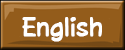
<style>
.page{position:relative;width:125px;height:50px;background:#935c1b}
.page>*{position:absolute;margin:0}
.t1{font:24px "Chinacat";color:#ffffff;font-weight:bold}
</style>
<div class="page">
<p class="t1" style="left:22px;top:17px;width:80px;height:25px">English</p>
</div>
